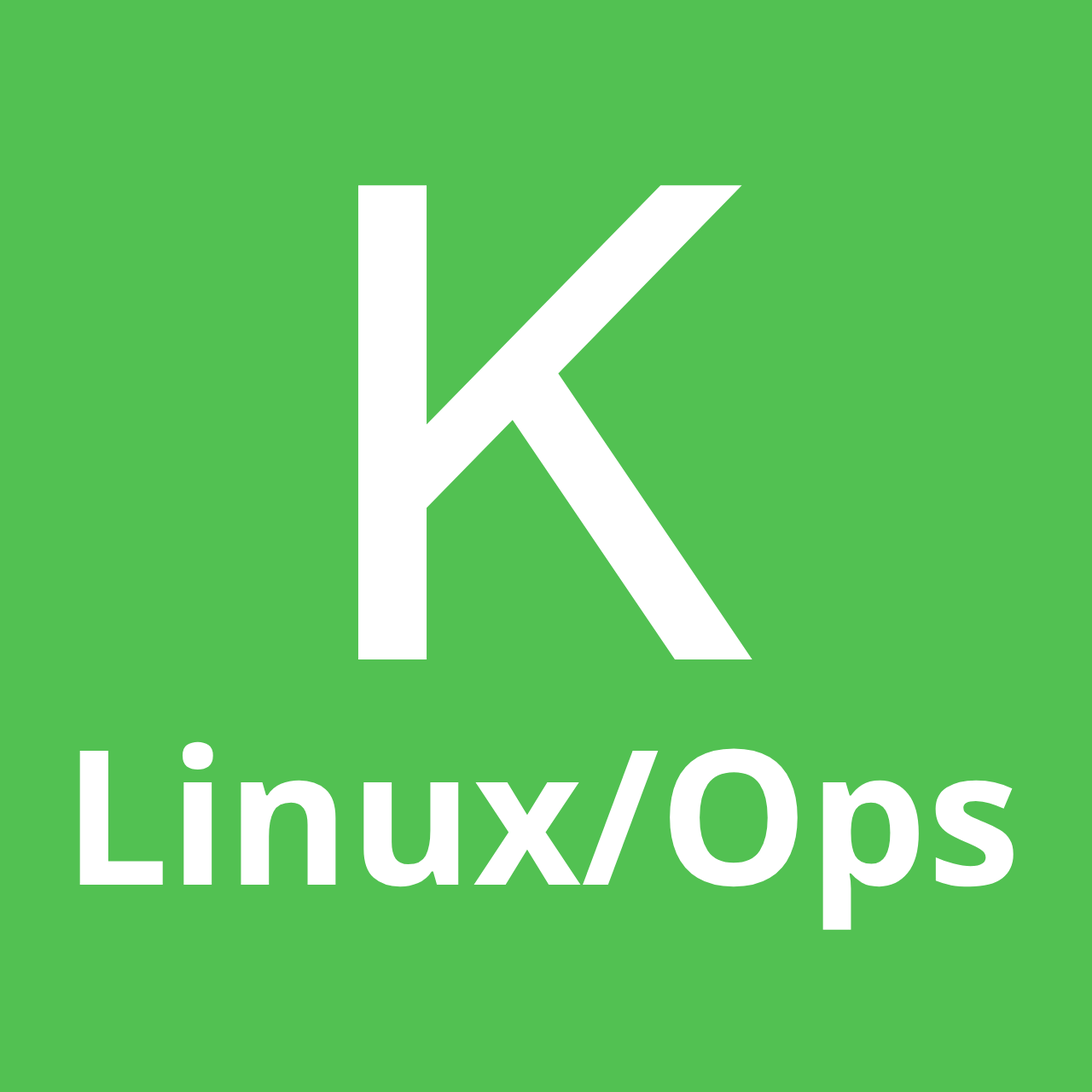
<style>
.page{position:relative;width:1092px;height:1092px;background:#52c152}
.page>*{position:absolute;margin:0}
.t1{font:187.7px "NotoSans-Bold";color:#ffffff}
.t2{font:682.5px "CMUBright-SemiBold";color:#ffffff}
</style>
<div class="page">
<p class="t1" style="left:79px;top:185px;width:934px;height:745px;text-align:center"><span class="t2">K<br></span>Linux/Ops</p>
</div>
